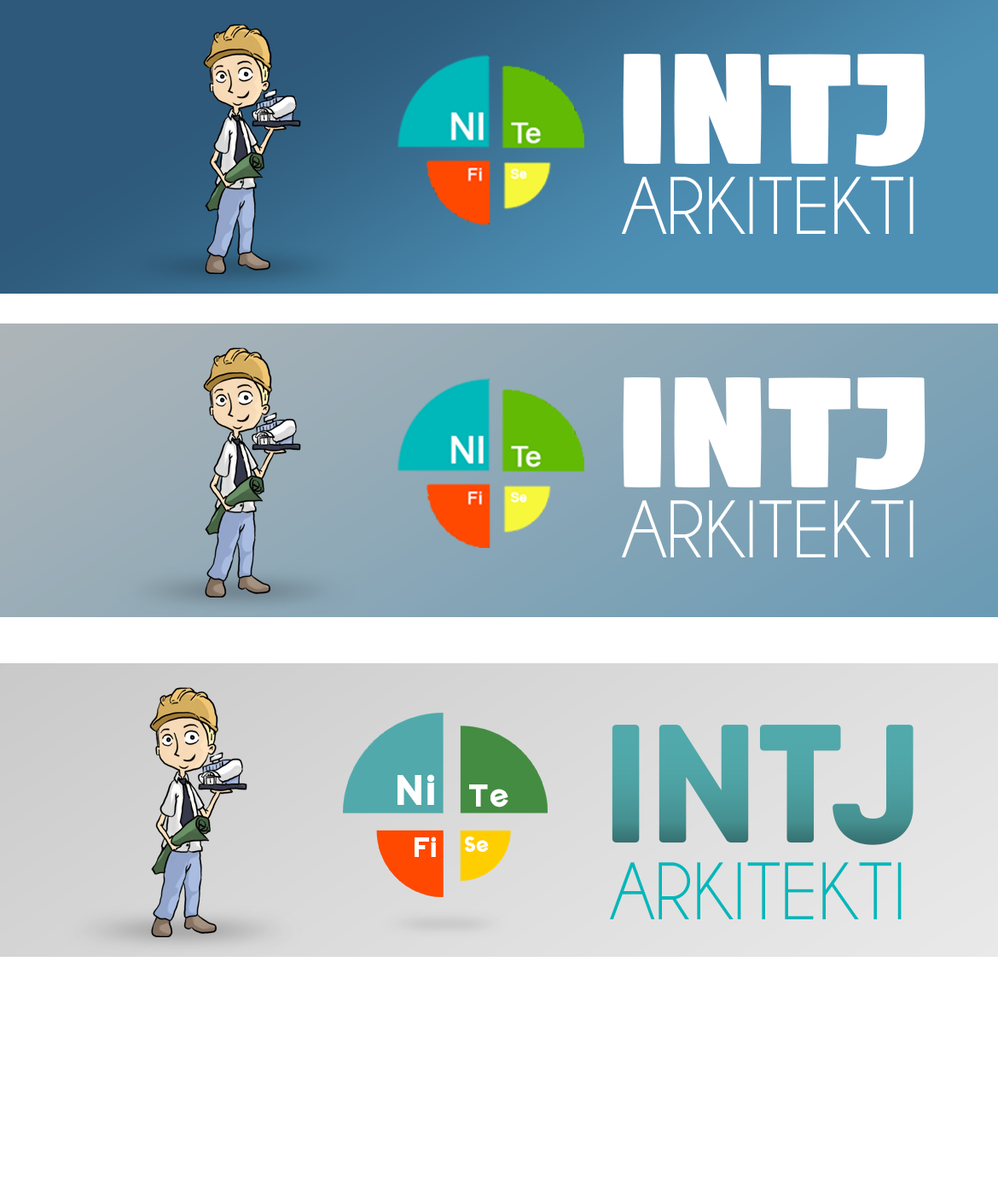
<style>
.page{position:relative;width:998px;height:1195px;background:#ffffff}
.page>*{position:absolute;margin:0}
.t1{font:181.7px "Digitalt";color:#ffffff}
.t2{font:82.3px "Champagne&Limousines";color:#ffffff;text-transform:uppercase}
.t3{font:168.1px "QanelasSoftDEMO-ExtraBold";color:#51a9ab}
.t4{font:41.8px "Bonkers";color:#ffffff}
.t5{font:31.3px "Bonkers";color:#ffffff}
.t6{font:27.4px "Bonkers";color:#ffffff}
.t7{font:20.8px "Bonkers";color:#ffffff}
.t8{font:82.3px "Champagne&Limousines";color:#00b7ba;text-transform:uppercase}
</style>
<div class="page">
<p class="t1" style="left:623px;top:54px;width:303px;height:112px">INTJ</p>
<p class="t2" style="left:622px;top:177px;width:292px;height:57px">Arkitekti</p>
<p class="t1" style="left:623px;top:377px;width:303px;height:113px">INTJ</p>
<p class="t2" style="left:622px;top:500px;width:292px;height:57px">Arkitekti</p>
<p class="t3" style="left:612px;top:724px;width:302px;height:121px">INTJ</p>
<p class="t4" style="left:398px;top:774px;width:36px;height:31px">Ni</p>
<p class="t5" style="left:469px;top:784px;width:40px;height:23px">Te</p>
<p class="t6" style="left:415px;top:836px;width:21px;height:21px">Fi</p>
<p class="t7" style="left:465px;top:836px;width:24px;height:16px">Se</p>
<p class="t8" style="left:610px;top:862px;width:292px;height:57px">Arkitekti</p>
</div>
